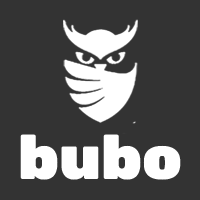
<style>
.page{position:relative;width:200px;height:200px;background:#333333}
.page>*{position:absolute;margin:0}
.t1{font:62.5px "RubikRoman-Black";color:#ffffff}
</style>
<div class="page">
<p class="t1" style="left:20px;top:134px;width:161px;height:46px">bubo</p>
</div>
